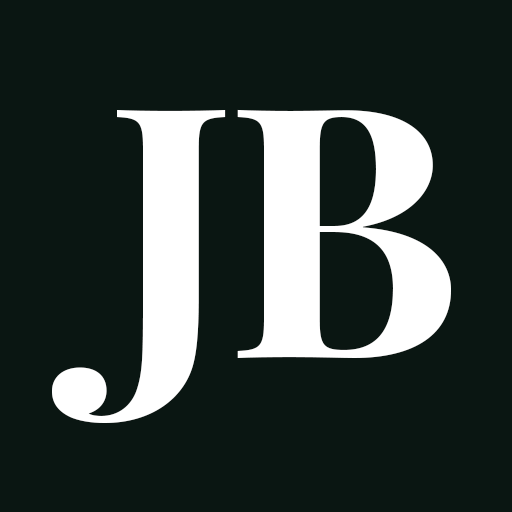
<style>
.page{position:relative;width:512px;height:512px;background:#0a1612}
.page>*{position:absolute;margin:0}
.t1{font:350px "PlayfairDisplay-Bold";letter-spacing:-0.025em;color:#ffffff}
</style>
<div class="page">
<p class="t1" style="left:52px;top:109px;width:399px;height:314px">JB</p>
</div>
